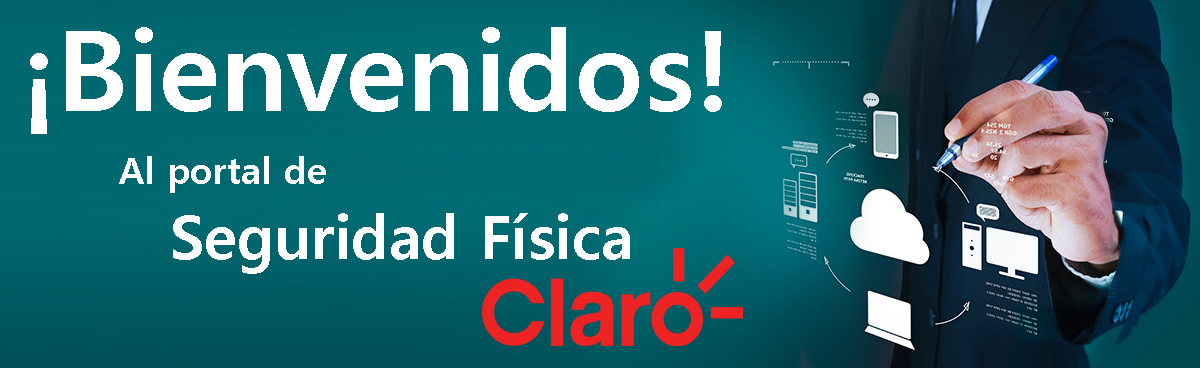
<style>
.page{position:relative;width:1200px;height:368px}
.page>*{position:absolute;margin:0}
.t1{font:111.3px "MalgunGothicBold";color:#ffffff}
.t2{font:36px "MalgunGothicBold";color:#ffffff}
.t3{font:60px "MalgunGothicBold";color:#ffffff}
</style>
<div class="page">
<p class="t1" style="left:30px;top:27px;width:692px;height:107px">¡Bienvenidos!</p>
<p class="t2" style="left:119px;top:156px;width:207px;height:37px">Al portal de</p>
<p class="t3" style="left:173px;top:213px;width:457px;height:61px">Seguridad Física</p>
</div>
